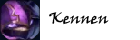
<style>
.page{position:relative;width:140px;height:40px;background:#ffffff}
.page>*{position:absolute;margin:0}
.t1{font:12px "VinerHandITC";color:#000000}
</style>
<div class="page">
<p class="t1" style="left:49px;top:12px;width:60px;height:13px">Kennen</p>
</div>
